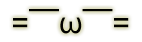
<style>
.page{position:relative;width:142px;height:42px;background:#ffffff}
.page>*{position:absolute;margin:0}
.t1{font:30px "ArialMT";color:#050300}
.t2{font:30px "DFWaWaSC-W5";color:#050300}
</style>
<div class="page">
<p class="t1" style="left:13px;top:9px;width:116px;height:25px">=<span class="t2">￣</span>ω<span class="t2">￣</span>=</p>
</div>
